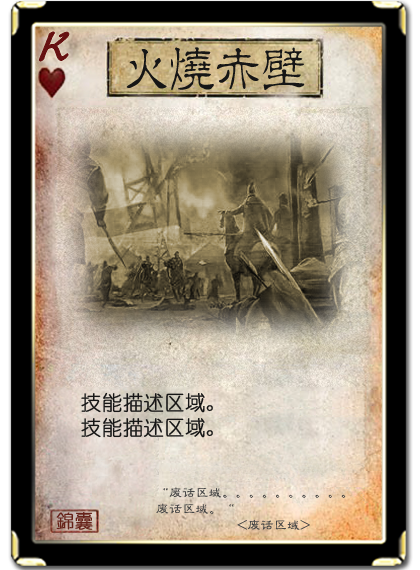
<style>
.page{position:relative;width:420px;height:570px}
.page>*{position:absolute;margin:0}
.t1{font:50.7px "Jxixinkai";color:#661213;font-weight:bold;font-style:italic}
.t2{font:50.7px "¾­µä·±½ÇÁ¥ Regular";letter-spacing:-0.1em;color:#161616}
.t3{font:20.3px "YouYuan";color:#161616;font-weight:bold}
.t4{font:13.2px "FZLBJW--GB1-0";color:#464646}
.t5{font:18.2px "YouYuan";color:#662219;font-weight:bold}
</style>
<div class="page">
<p class="t1" style="left:39px;top:32px;width:30px;height:29px">K</p>
<p class="t2" style="left:126px;top:47px;width:179px;height:44px">火烧赤壁</p>
<p class="t3" style="left:81px;top:392px;width:132px;height:21px">技能描述区域。</p>
<p class="t3" style="left:81px;top:417px;width:132px;height:21px">技能描述区域。</p>
<p class="t4" style="left:163px;top:487px;width:183px;height:11px">“废话区域。。。。。。。。。。</p>
<p class="t4" style="left:156px;top:503px;width:78px;height:12px">废话区域。“</p>
<p class="t5" style="left:56px;top:512px;width:37px;height:18px">錦囊</p>
<p class="t4" style="left:237px;top:519px;width:73px;height:11px">&lt;废话区域&gt;</p>
</div>
